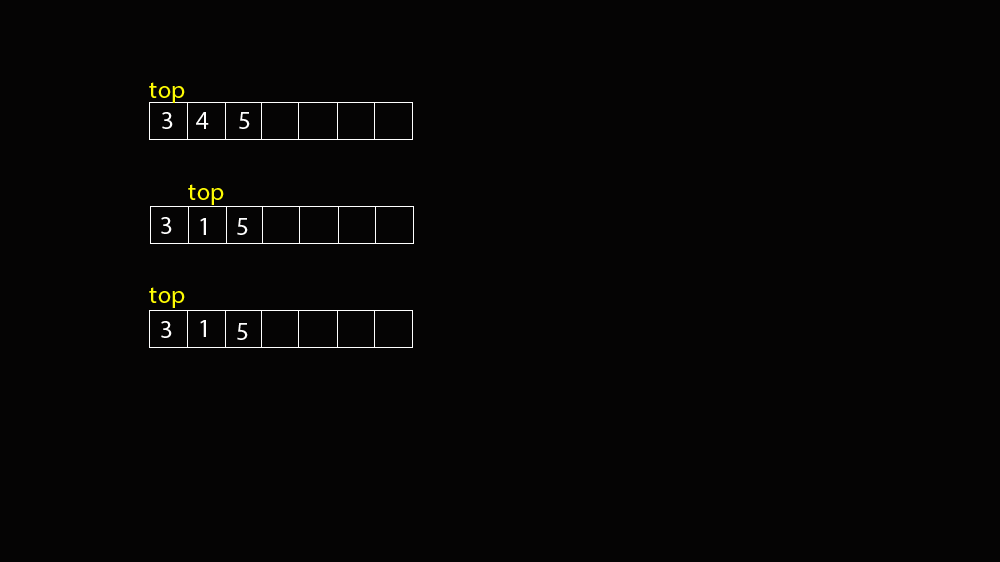
<style>
.page{position:relative;width:1000px;height:562px;background:#050404}
.page>*{position:absolute;margin:0}
.t1{font:25px "MyriadPro-Regular";color:#fefb04}
.t2{font:25px "MyriadPro-Regular";color:#ffffff}
</style>
<div class="page">
<p class="t1" style="left:149px;top:82px;width:36px;height:21px">top</p>
<p class="t2" style="left:162px;top:112px;width:11px;height:17px">3</p>
<p class="t2" style="left:196px;top:112px;width:13px;height:17px">4</p>
<p class="t2" style="left:239px;top:112px;width:11px;height:17px">5</p>
<p class="t1" style="left:188px;top:184px;width:36px;height:21px">top</p>
<p class="t2" style="left:161px;top:217px;width:11px;height:17px">3</p>
<p class="t2" style="left:200px;top:218px;width:6px;height:17px">1</p>
<p class="t2" style="left:237px;top:218px;width:11px;height:17px">5</p>
<p class="t1" style="left:149px;top:287px;width:36px;height:21px">top</p>
<p class="t2" style="left:161px;top:321px;width:11px;height:17px">3</p>
<p class="t2" style="left:200px;top:320px;width:6px;height:17px">1</p>
<p class="t2" style="left:237px;top:323px;width:11px;height:17px">5</p>
</div>
